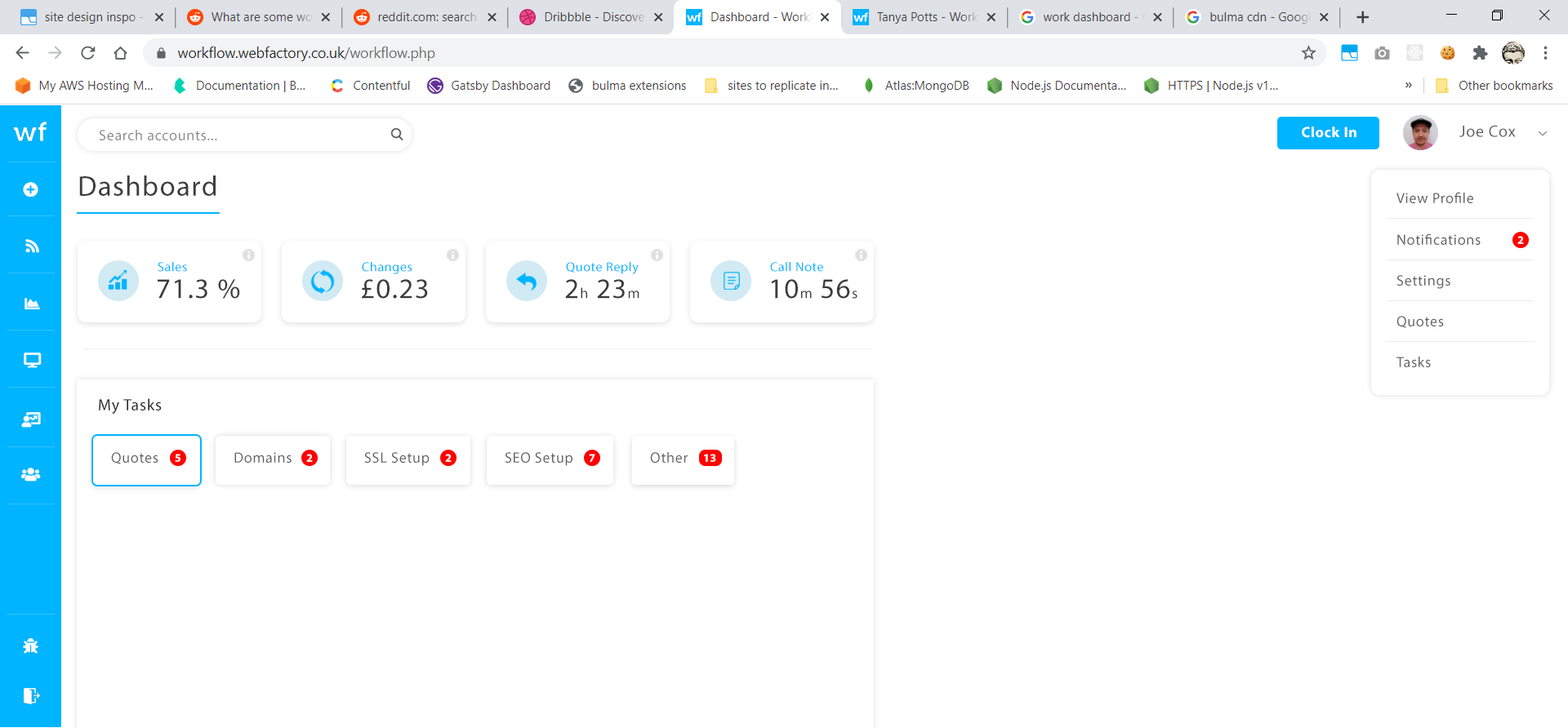
<style>
.page{position:relative;width:1568px;height:728px;background:#ffffff}
.page>*{position:absolute;margin:0}
.t1{font:16.3px "MyriadPro-Regular";letter-spacing:0.04em;color:#606060}
.t2{font:14.7px "MyriadPro-Regular";letter-spacing:0.04em;color:#888888}
.t3{font:14.7px "MyriadPro-Bold";letter-spacing:0.04em;color:#ffffff}
.t4{font:28.6px "MyriadPro-Regular";letter-spacing:0.04em;color:#3c3c3c}
.t5{font:14.7px "MyriadPro-Regular";letter-spacing:0.04em;color:#606060}
.t6{font:11.4px "MyriadPro-Bold";letter-spacing:0.04em;color:#ffffff}
.t7{font:13.1px "MyriadPro-Regular";letter-spacing:0.04em;color:#00b4ff}
.t8{font:14.7px "MyriadPro-Regular";letter-spacing:0.04em;color:#3c3c3c}
.t9{font:16.3px "MyriadPro-Regular";letter-spacing:0.04em;color:#2b2b2b}
</style>
<div class="page">
<p class="t1" style="left:1459px;top:125px;width:57px;height:12px">Joe Cox</p>
<p class="t2" style="left:99px;top:130px;width:118px;height:10px">Search accounts...</p>
<p class="t3" style="left:1302px;top:127px;width:54px;height:11px">Clock In</p>
<p class="t4" style="left:79px;top:176px;width:137px;height:20px">Dashboard</p>
<p class="t5" style="left:1396px;top:192px;width:77px;height:11px">View Profile</p>
<p class="t5" style="left:1397px;top:234px;width:84px;height:11px">Notifications</p>
<p class="t6" style="left:1517px;top:236px;width:7px;height:8px">2</p>
<p class="t7" style="left:158px;top:262px;width:29px;height:10px">Sales</p>
<p class="t7" style="left:362px;top:262px;width:50px;height:12px">Changes</p>
<p class="t7" style="left:566px;top:262px;width:73px;height:12px">Quote Reply</p>
<p class="t7" style="left:770px;top:262px;width:53px;height:10px">Call Note</p>
<p class="t4" style="left:158px;top:279px;width:82px;height:20px">71.3 %</p>
<p class="t4" style="left:362px;top:279px;width:66px;height:20px">£0.23</p>
<p class="t4" style="left:565px;top:279px;width:74px;height:20px">2<span class="t8">h</span> 23<span class="t8">m</span></p>
<p class="t4" style="left:771px;top:279px;width:87px;height:20px">10<span class="t8">m</span> 56<span class="t8">s</span></p>
<p class="t5" style="left:1396px;top:275px;width:54px;height:14px">Settings</p>
<p class="t5" style="left:1396px;top:316px;width:48px;height:12px">Quotes</p>
<p class="t5" style="left:1396px;top:357px;width:35px;height:11px">Tasks</p>
<p class="t9" style="left:99px;top:399px;width:63px;height:15px">My Tasks</p>
<p class="t5" style="left:111px;top:452px;width:47px;height:13px">Quotes</p>
<p class="t6" style="left:175px;top:454px;width:5px;height:8px">5</p>
<p class="t5" style="left:234px;top:452px;width:58px;height:11px">Domains</p>
<p class="t6" style="left:306px;top:454px;width:7px;height:8px">2</p>
<p class="t5" style="left:364px;top:452px;width:66px;height:14px">SSL Setup</p>
<p class="t6" style="left:445px;top:454px;width:7px;height:8px">2</p>
<p class="t5" style="left:505px;top:452px;width:67px;height:14px">SEO Setup</p>
<p class="t6" style="left:589px;top:454px;width:6px;height:8px">7</p>
<p class="t5" style="left:650px;top:452px;width:38px;height:11px">Other</p>
<p class="t6" style="left:704px;top:454px;width:12px;height:8px">13</p>
</div>
